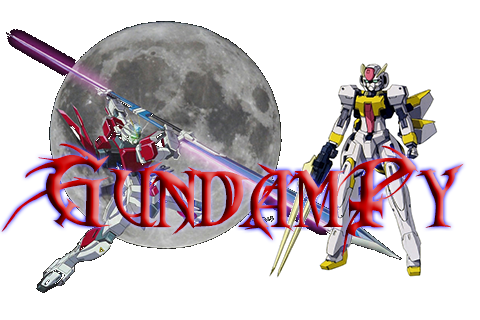
<style>
.page{position:relative;width:480px;height:320px;background:#ffffff}
.page>*{position:absolute;margin:0}
.t1{font:72px "MetalMacabre"}
</style>
<div class="page">
<p class="t1" style="left:1px;top:143px;width:463px;height:113px">GundamPy</p>
</div>
